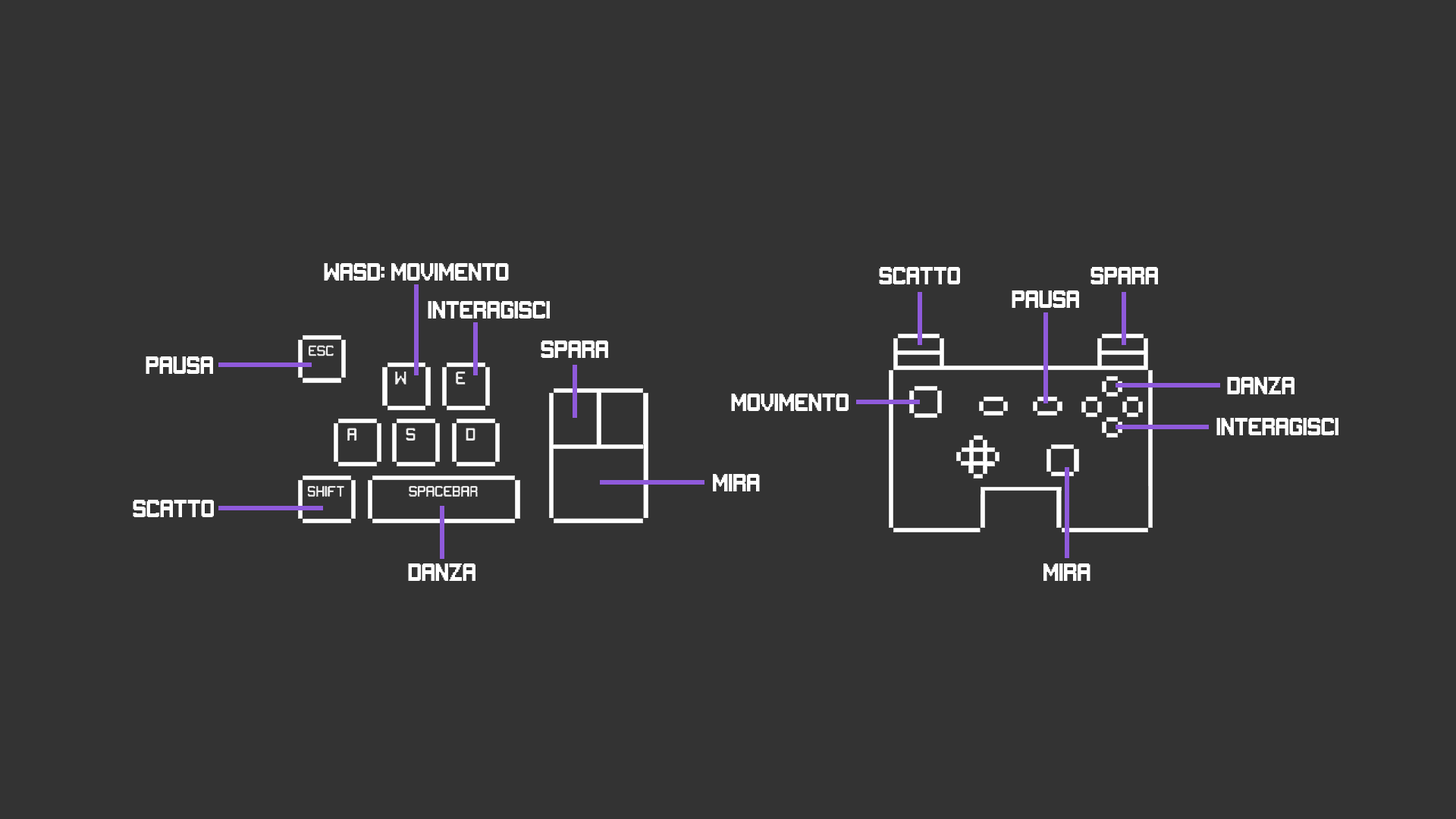
<style>
.page{position:relative;width:1456px;height:819px;background:#333333}
.page>*{position:absolute;margin:0}
.t1{font:18.2px "Gameplay";color:#ffffff}
</style>
<div class="page">
<p class="t1" style="left:324px;top:263px;width:185px;height:18px">wasd: Movimento</p>
<p class="t1" style="left:879px;top:267px;width:81px;height:17px">Scatto</p>
<p class="t1" style="left:1090px;top:267px;width:68px;height:17px">Spara</p>
<p class="t1" style="left:1012px;top:290px;width:67px;height:18px">Pausa</p>
<p class="t1" style="left:428px;top:301px;width:122px;height:17px">Interagisci</p>
<p class="t1" style="left:541px;top:340px;width:67px;height:18px">Spara</p>
<p class="t1" style="left:146px;top:356px;width:67px;height:18px">Pausa</p>
<p class="t1" style="left:1227px;top:377px;width:67px;height:17px">Danza</p>
<p class="t1" style="left:731px;top:394px;width:118px;height:17px">Movimento</p>
<p class="t1" style="left:1216px;top:418px;width:122px;height:17px">Interagisci</p>
<p class="t1" style="left:713px;top:474px;width:47px;height:17px">Mira</p>
<p class="t1" style="left:133px;top:500px;width:81px;height:17px">Scatto</p>
<p class="t1" style="left:408px;top:563px;width:67px;height:18px">Danza</p>
<p class="t1" style="left:1043px;top:563px;width:47px;height:18px">Mira</p>
</div>
